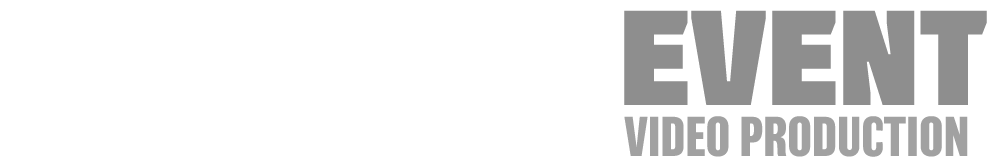
<style>
.page{position:relative;width:990px;height:165px;background:#ffffff}
.page>*{position:absolute;margin:0}
.t1{font:134.5px "Molot";color:#8e8e8e}
.t2{font:51.2px "Balboa-Bold";color:#a1a1a1;text-transform:uppercase}
</style>
<div class="page">
<p class="t1" style="left:624px;top:10px;width:363px;height:95px">event</p>
<p class="t2" style="left:624px;top:116px;width:344px;height:41px">video production</p>
</div>
